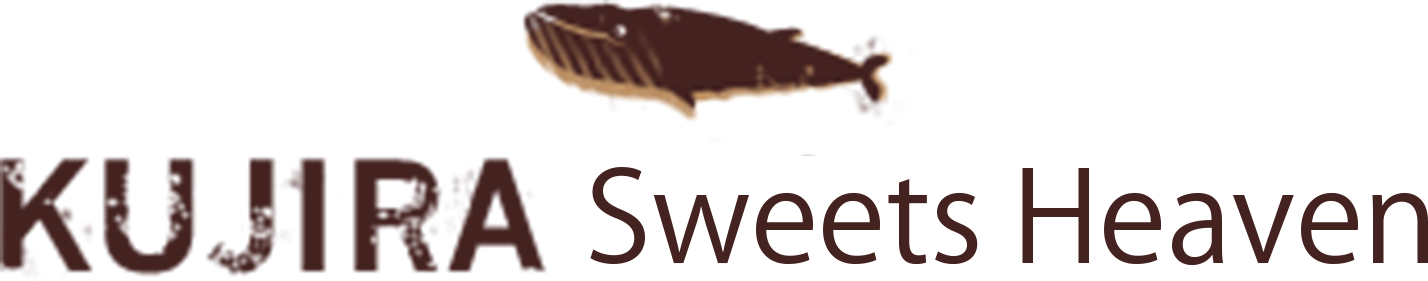
<style>
.page{position:relative;width:1428px;height:281px;background:#ffffff}
.page>*{position:absolute;margin:0}
.t1{font:125px "KozGoPr6N-Regular";color:#442220}
</style>
<div class="page">
<p class="t1" style="left:590px;top:167px;width:838px;height:99px">Sweets Heaven</p>
</div>
